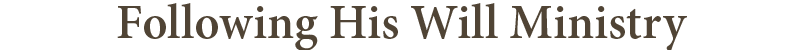
<style>
.page{position:relative;width:800px;height:50px;background:#ffffff}
.page>*{position:absolute;margin:0}
.t1{font:48px "AdobeHebrew-Bold";color:#504435}
</style>
<div class="page">
<p class="t1" style="left:117px;top:3px;width:570px;height:48px">Following His Will Ministry</p>
</div>
